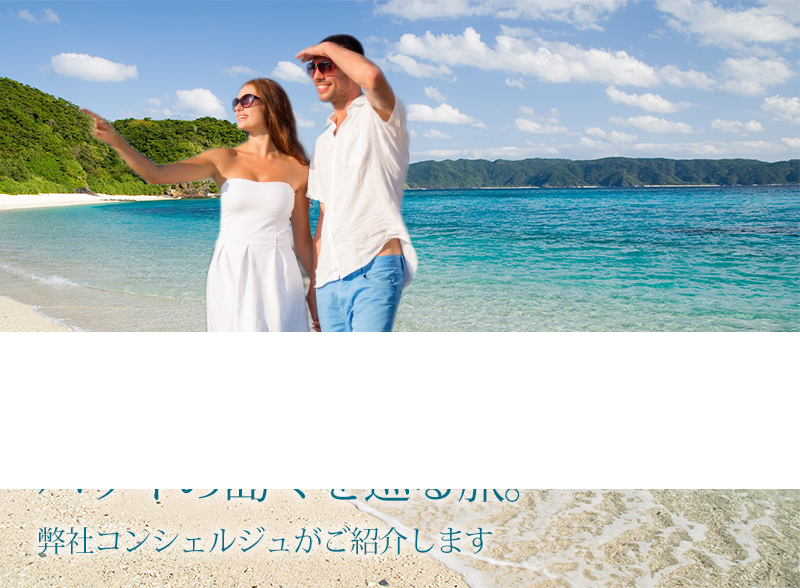
<style>
.page{position:relative;width:800px;height:588px;background:#ffffff}
.page>*{position:absolute;margin:0}
.t1{font:29.7px/54px "KozMinPr6N-Regular";letter-spacing:-0.04em}
.t2{font:48.6px/54px "KozMinPr6N-Regular";letter-spacing:-0.04em}
</style>
<div class="page">
<p class="t1" style="left:37px;top:456px;width:483px;height:99px"><span class="t2">ハワイの島々を巡る旅。<br></span>弊社コンシェルジュがご紹介します</p>
</div>
